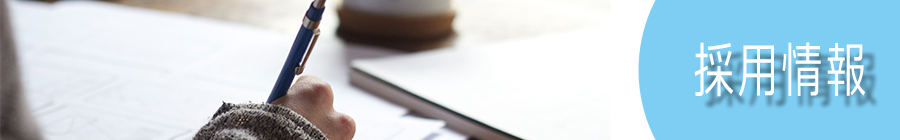
<style>
.page{position:relative;width:900px;height:140px}
.page>*{position:absolute;margin:0}
.t1{font:60px "Meiryo-Italic";letter-spacing:0.1em;color:#ffffff;scale:0.67 1}
</style>
<div class="page">
<p class="t1" style="left:694px;top:42px;width:171px;height:55px">採用情報</p>
</div>
